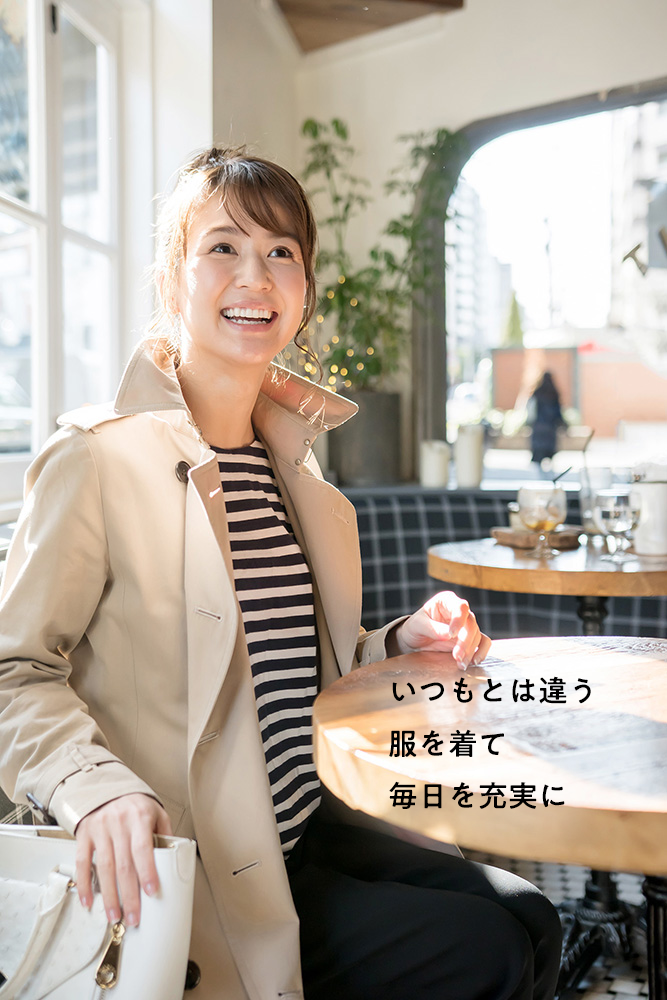
<style>
.page{position:relative;width:667px;height:1000px}
.page>*{position:absolute;margin:0}
.t1{font:30px "PA1GothicStd-Medium";color:#000000}
</style>
<div class="page">
<p class="t1" style="left:389px;top:676px;width:202px;height:133px">いつもとは違う<br>服を着て<br>毎日を充実に</p>
</div>
